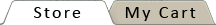
<style>
.page{position:relative;width:216px;height:25px;background:#ffffff}
.page>*{position:absolute;margin:0}
.t1{font:18px "Calibri";letter-spacing:0.121em;color:#000000}
</style>
<div class="page">
<p class="t1" style="left:34px;top:7px;width:47px;height:11px">Store</p>
<p class="t1" style="left:125px;top:7px;width:71px;height:14px">My Cart</p>
</div>
